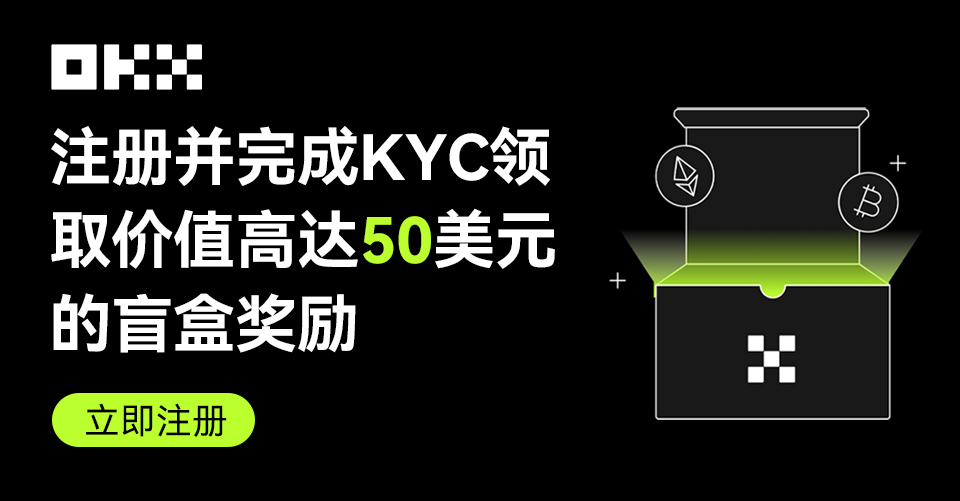
<style>
.page{position:relative;width:960px;height:501px;background:#000000}
.page>*{position:absolute;margin:0}
.t1{font:62.6px/83.5px "HarmonyOS_Sans_SC_Bold";letter-spacing:-0.01em;color:#ffffff}
.t2{font:62.6px/83.5px "HarmonyOS_Sans_SC_Bold";letter-spacing:-0.01em;color:#bcff2f}
.t3{font:35.8px "HarmonyOS_Sans_SC";color:#000000}
</style>
<div class="page">
<p class="t1" style="left:51px;top:126px;width:504px;height:227px">注册并完成KYC领<br>取价值高达<span class="t2">50</span>美元<br>的盲盒奖励</p>
<p class="t3" style="left:86px;top:403px;width:141px;height:34px">立即注册</p>
</div>
